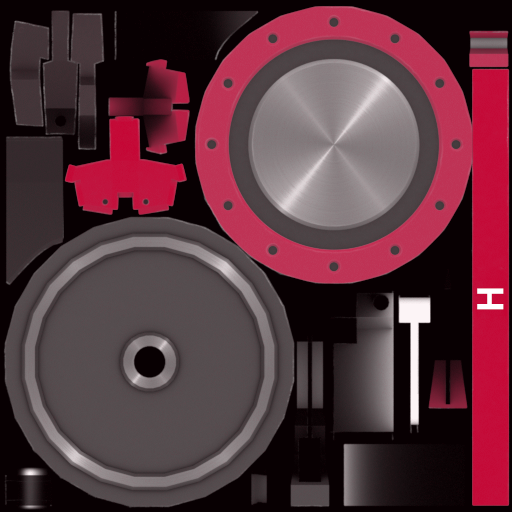
<style>
.page{position:relative;width:512px;height:512px;background:#080002}
.page>*{position:absolute;margin:0}
.t1{font:36px "Helvetica-Bold";color:#ffffff}
</style>
<div class="page">
<p class="t1" style="left:477px;top:288px;width:27px;height:22px;rotate:-90deg">H</p>
</div>
